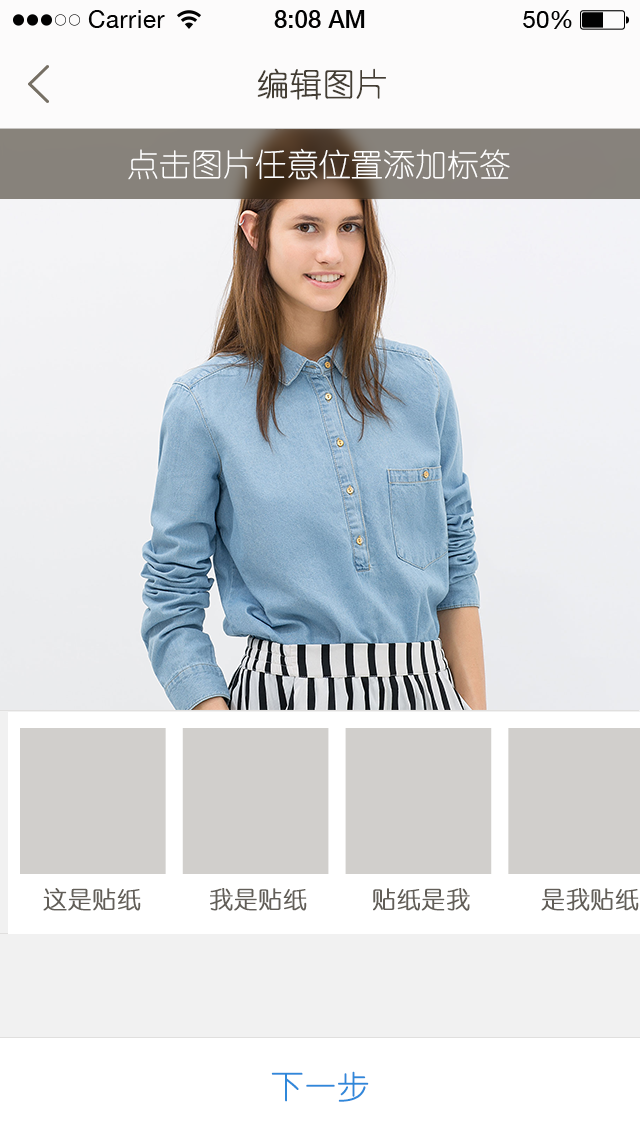
<style>
.page{position:relative;width:640px;height:1136px}
.page>*{position:absolute;margin:0}
.t1{font:32px "YouYuan";color:#433d33;text-transform:uppercase;font-weight:bold}
.t2{font:32px "YouYuan";color:#fefefe;text-transform:uppercase}
.t3{font:24px "YouYuan";color:#625e58;text-transform:uppercase;font-weight:bold}
.t4{font:32px "YouYuan";color:#2f88da;text-transform:uppercase;font-weight:bold}
</style>
<div class="page">
<p class="t1" style="left:257px;top:68px;width:129px;height:32px">编辑图片</p>
<p class="t2" style="left:128px;top:148px;width:382px;height:32px">点击图片任意位置添加标签</p>
<p class="t3" style="left:43px;top:888px;width:98px;height:23px">这是贴纸</p>
<p class="t3" style="left:210px;top:888px;width:97px;height:23px">我是贴纸</p>
<p class="t3" style="left:373px;top:888px;width:97px;height:23px">贴纸是我</p>
<p class="t3" style="left:541px;top:888px;width:98px;height:23px">是我贴纸</p>
<p class="t4" style="left:271px;top:1071px;width:98px;height:31px">下一步</p>
</div>
